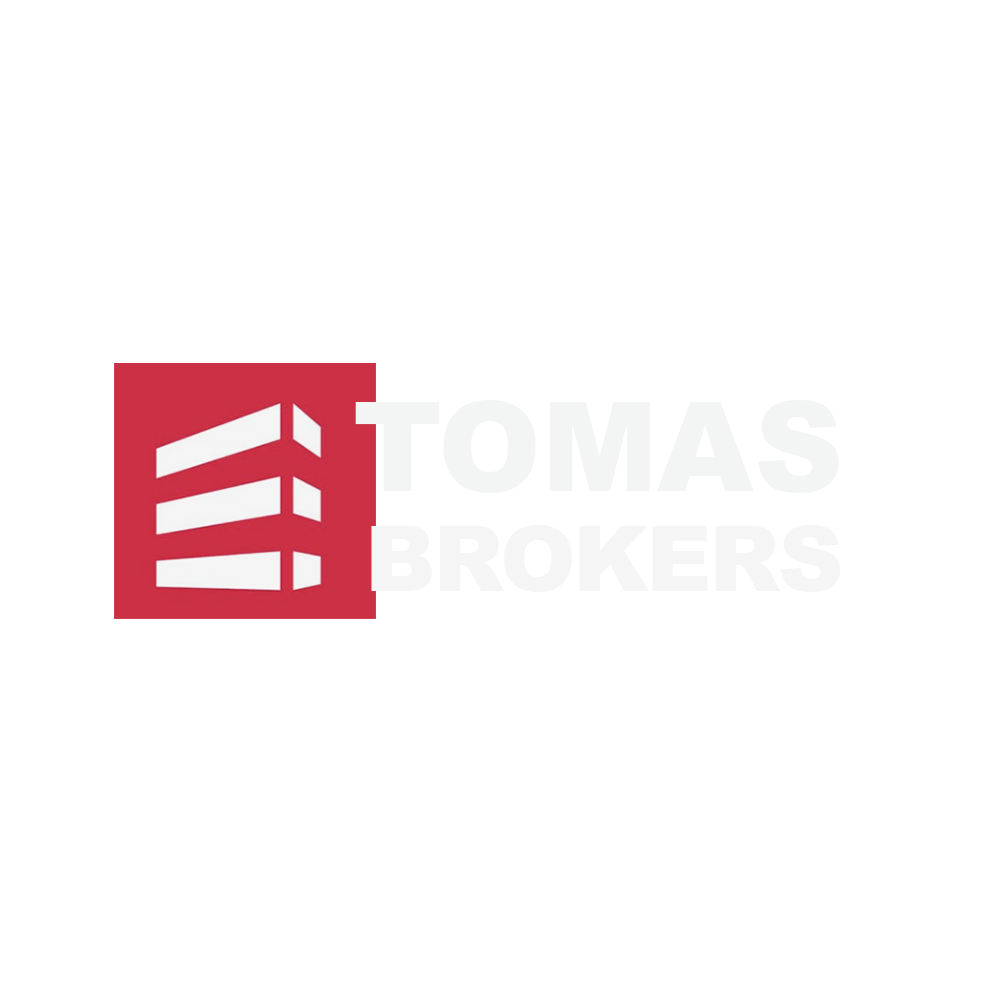
<style>
.page{position:relative;width:1000px;height:1000px;background:#ffffff}
.page>*{position:absolute;margin:0}
.t1{font:123.6px "Arial-Black";color:#f3f5f5}
.t2{font:90.7px "Arial-Black";letter-spacing:-0.025em;color:#f5f5f5}
</style>
<div class="page">
<p class="t1" style="left:355px;top:400px;width:484px;height:93px">TOMAS</p>
<p class="t2" style="left:371px;top:525px;width:470px;height:67px">BROKERS</p>
</div>
